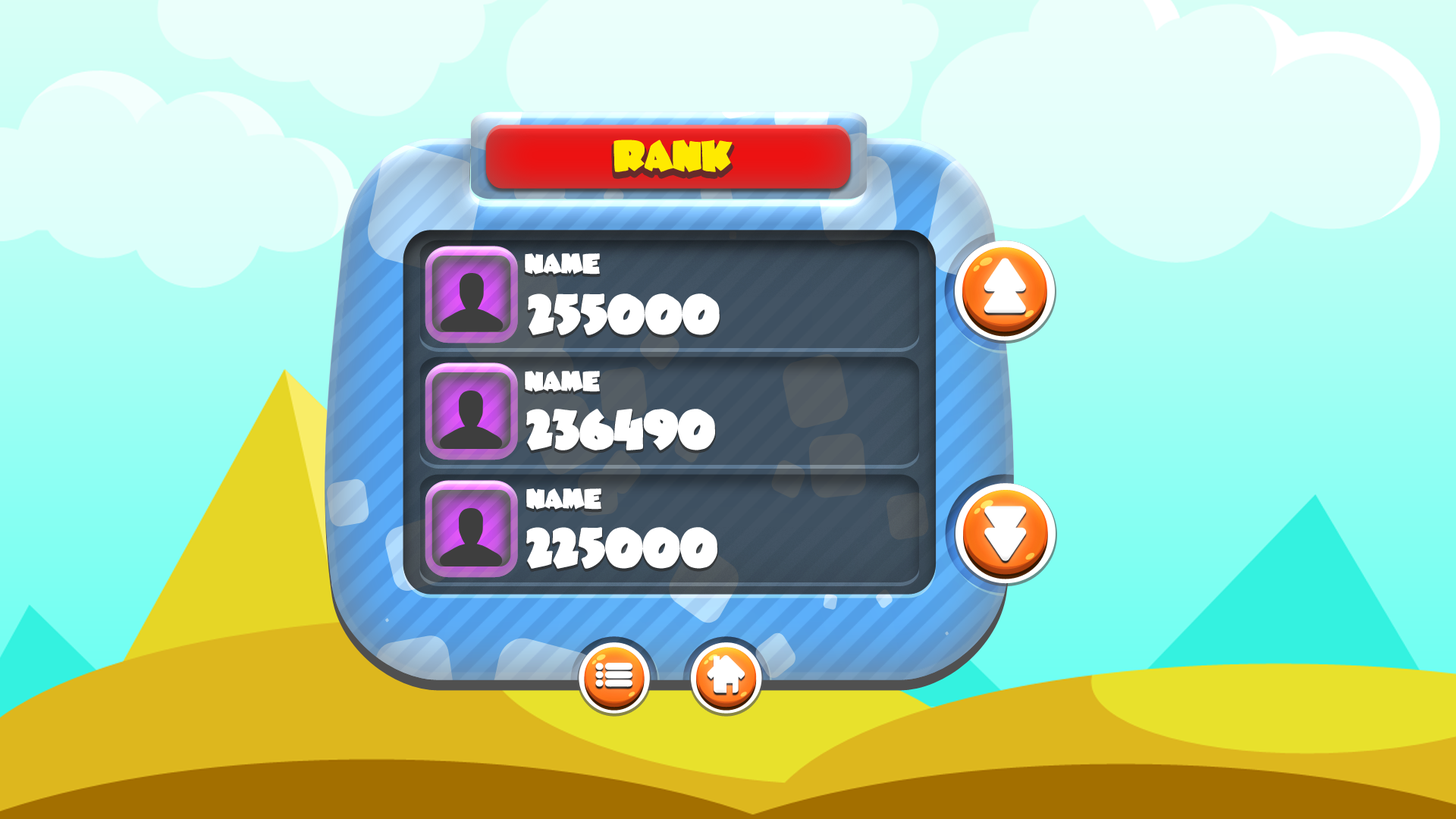
<style>
.page{position:relative;width:1456px;height:819px}
.page>*{position:absolute;margin:0}
.t1{font:31.9px "JuneBug";letter-spacing:-0.02em;color:#ffea00}
.t2{font:20.6px "JuneBug";letter-spacing:-0.02em;color:#ffffff}
.t3{font:41.2px "JuneBug";letter-spacing:-0.02em;color:#ffffff}
</style>
<div class="page">
<p class="t1" style="left:613px;top:140px;width:120px;height:32px">RANK</p>
<p class="t2" style="left:525px;top:253px;width:75px;height:22px">NAME</p>
<p class="t3" style="left:528px;top:293px;width:192px;height:42px">255000</p>
<p class="t2" style="left:525px;top:371px;width:75px;height:21px">NAME</p>
<p class="t3" style="left:526px;top:409px;width:189px;height:41px">236490</p>
<p class="t2" style="left:526px;top:488px;width:75px;height:22px">NAME</p>
<p class="t3" style="left:526px;top:527px;width:191px;height:42px">225000</p>
</div>
